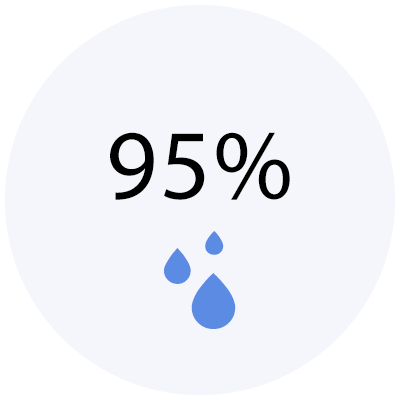
<style>
.page{position:relative;width:400px;height:400px;background:#f5f6fb}
.page>*{position:absolute;margin:0}
.t1{font:100px "MyriadPro-Regular";letter-spacing:0.025em;color:#000000}
</style>
<div class="page">
<p class="t1" style="left:110px;top:132px;width:180px;height:68px">95%</p>
</div>
